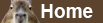
<style>
.page{position:relative;width:103px;height:23px;background:#5c432d}
.page>*{position:absolute;margin:0}
.t1{font:19px "Arial-BoldMT";color:#ffffff}
</style>
<div class="page">
<p class="t1" style="left:41px;top:4px;width:52px;height:14px">Home</p>
</div>
